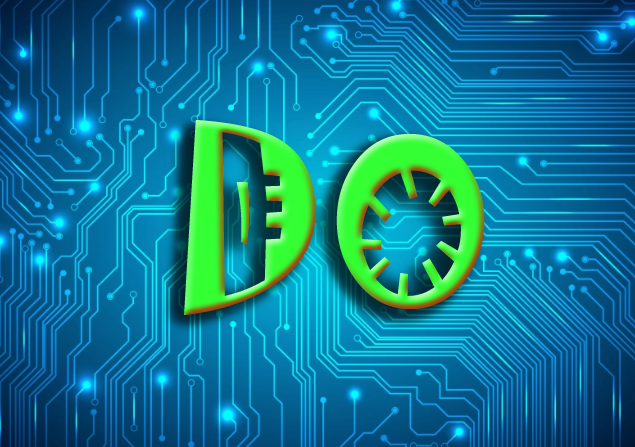
<style>
.page{position:relative;width:635px;height:447px}
.page>*{position:absolute;margin:0}
.t1{font:220px "Jokerman-Regular"}
</style>
<div class="page">
<p class="t1" style="left:184px;top:120px;width:301px;height:195px">DO</p>
</div>
